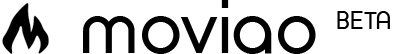
<style>
.page{position:relative;width:397px;height:54px;background:#ffffff}
.page>*{position:absolute;margin:0}
.t1{font:72px "TimeBurner-Bold";color:#000000}
.t2{font:24px "TimeBurner-Bold";color:#000000}
</style>
<div class="page">
<p class="t1" style="left:83px;top:0px;width:307px;height:54px">moviao <span class="t2">BETA</span></p>
</div>
